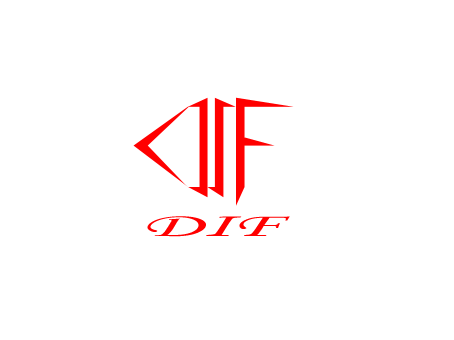
<style>
.page{position:relative;width:454px;height:340px;background:#ffffff}
.page>*{position:absolute;margin:0}
.t1{font:33.6px "MonotypeCorsiva";letter-spacing:0.02em;color:#ff0000;scale:2.56 1}
</style>
<div class="page">
<p class="t1" style="left:147px;top:216px;width:143px;height:21px">DIF</p>
</div>
